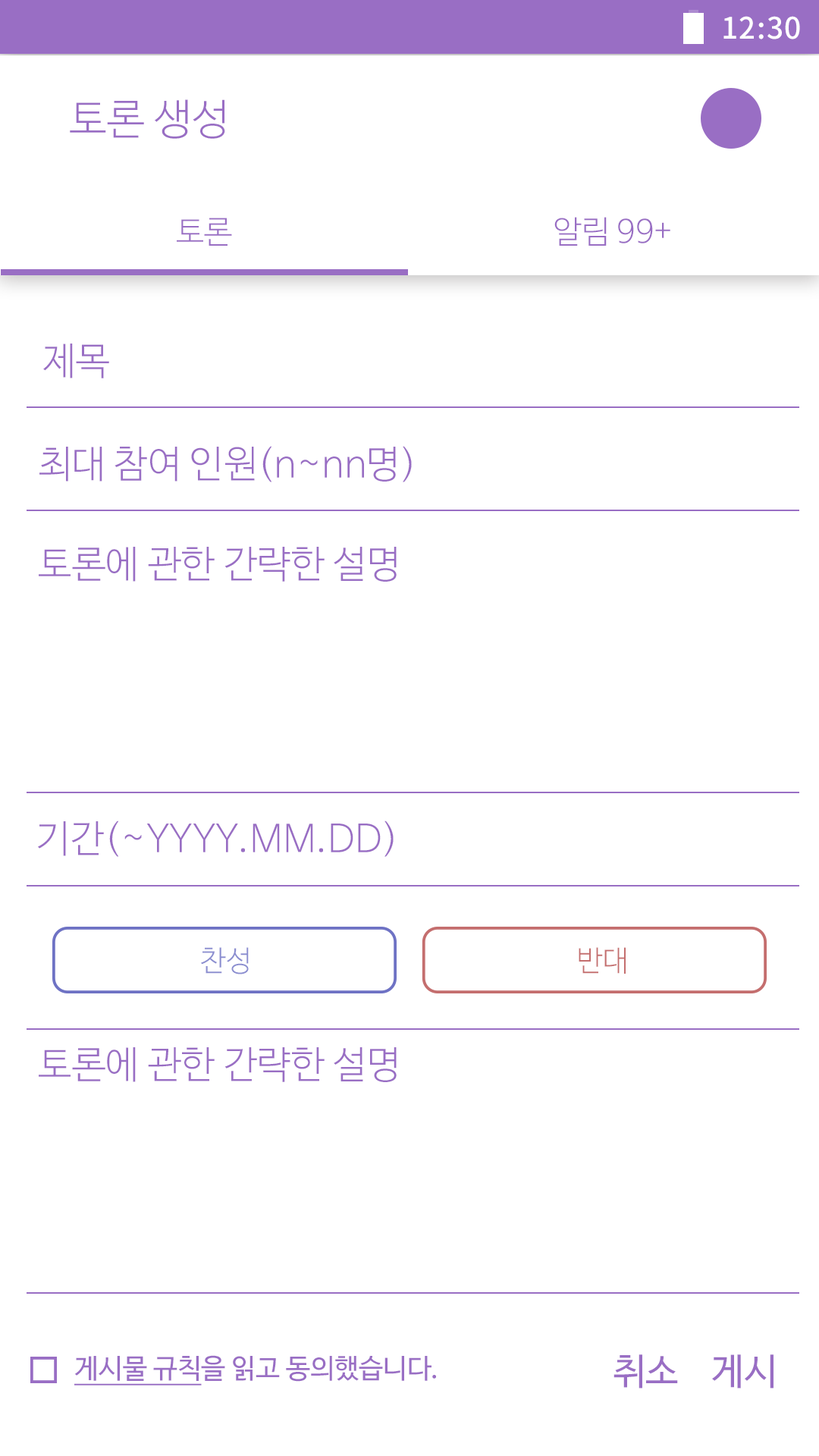
<style>
.page{position:relative;width:819px;height:1456px;background:#ffffff}
.page>*{position:absolute;margin:0}
.t1{font:29.6px "NotoSansCJKkr-Medium";letter-spacing:0.029em;color:#ffffff}
.t2{font:42.3px "NanumBarunGothicLight";color:#996ec4}
.t3{font:31.6px "NanumBarunGothicLight";color:#996ec4}
.t4{font:37.9px "NanumBarunGothicLight";color:#996ec4}
.t5{font:28.8px "NanumBarunGothicLight";color:#8b8ed0}
.t6{font:28.8px "NanumBarunGothicLight";color:#c46e6e}
.t7{font:27.1px "NanumBarunGothic";color:#996ec4}
.t8{font:27.1px "NanumBarunGothic";color:#996ec4;text-decoration:underline}
.t9{font:36.9px "NanumBarunGothic";color:#996ec4}
</style>
<div class="page">
<p class="t1" style="left:723px;top:16px;width:77px;height:23px">12:30</p>
<p class="t2" style="left:70px;top:99px;width:155px;height:40px">토론 생성</p>
<p class="t3" style="left:177px;top:218px;width:55px;height:28px">토론</p>
<p class="t3" style="left:554px;top:217px;width:116px;height:29px">알림 99+</p>
<p class="t4" style="left:43px;top:344px;width:66px;height:34px">제목</p>
<p class="t4" style="left:39px;top:446px;width:373px;height:36px">최대 참여 인원(n~nn명)</p>
<p class="t4" style="left:39px;top:547px;width:358px;height:35px">토론에 관한 간략한 설명</p>
<p class="t4" style="left:38px;top:821px;width:356px;height:36px">기간(~YYYY.MM.DD)</p>
<p class="t5" style="left:201px;top:947px;width:48px;height:27px">찬성</p>
<p class="t6" style="left:579px;top:947px;width:47px;height:27px">반대</p>
<p class="t4" style="left:39px;top:1047px;width:358px;height:35px">토론에 관한 간략한 설명</p>
<p class="t7" style="left:74px;top:1355px;width:362px;height:30px"><span class="t8">게시물 규칙</span>을 읽고 동의했습니다.</p>
<p class="t9" style="left:613px;top:1354px;width:160px;height:34px">취소    게시</p>
</div>
